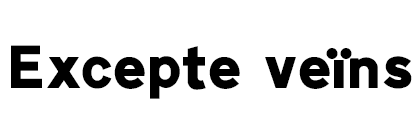
<style>
.page{position:relative;width:420px;height:120px;background:#ffffff}
.page>*{position:absolute;margin:0}
.t1{font:60px "Ccrige-Regular";color:#000000}
</style>
<div class="page">
<p class="t1" style="left:11px;top:45px;width:401px;height:54px">Excepte veiïns</p>
</div>
